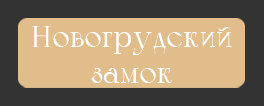
<style>
.page{position:relative;width:264px;height:106px;background:#e0bd8b}
.page>*{position:absolute;margin:0}
.t1{font:30px "Calypso-Regular";color:#ffffff}
</style>
<div class="page">
<p class="t1" style="left:32px;top:26px;width:200px;height:57px;text-align:center">Новогрудский<br>замок</p>
</div>
